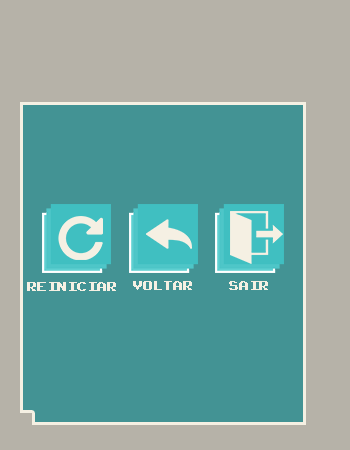
<style>
.page{position:relative;width:350px;height:450px;background:#439394}
.page>*{position:absolute;margin:0}
.t1{font:17.6px "ArcadeClassic";color:#f5f0e3}
.t2{font:18px "ArcadeClassic";color:#f5f0e3}
</style>
<div class="page">
<p class="t1" style="left:133px;top:281px;width:59px;height:9px">voltar</p>
<p class="t1" style="left:229px;top:281px;width:39px;height:9px">Sair</p>
<p class="t2" style="left:27px;top:282px;width:89px;height:9px">reiniciar</p>
</div>
